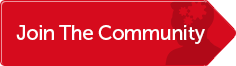
<style>
.page{position:relative;width:236px;height:66px;background:#d60b1d}
.page>*{position:absolute;margin:0}
.t1{font:20px "MuseoSans-500";letter-spacing:-0.02em;color:#ffffff}
</style>
<div class="page">
<p class="t1" style="left:16px;top:25px;width:189px;height:19px">Join The Community</p>
</div>
